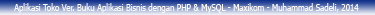
<style>
.page{position:relative;width:375px;height:15px}
.page>*{position:absolute;margin:0}
.t1{font:10px "Tahoma";color:#fbf9f7;scale:0.79 1}
</style>
<div class="page">
<p class="t1" style="left:14px;top:3px;width:345px;height:10px">Aplikasi Toko Ver. Buku Aplikasi Bisnis dengan PHP &amp; MySQL - Maxikom - Muhammad Sadeli, 2014</p>
</div>
